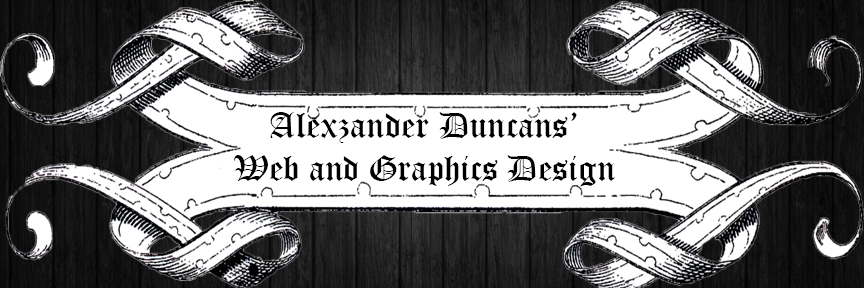
<style>
.page{position:relative;width:864px;height:288px;background:#ffffff}
.page>*{position:absolute;margin:0}
.t1{font:36px "OldEnglishTextMT";color:#000000}
</style>
<div class="page">
<p class="t1" style="left:234px;top:112px;width:381px;height:75px;text-align:center">Alexzander Duncans’<br>Web and Graphics Design</p>
</div>
